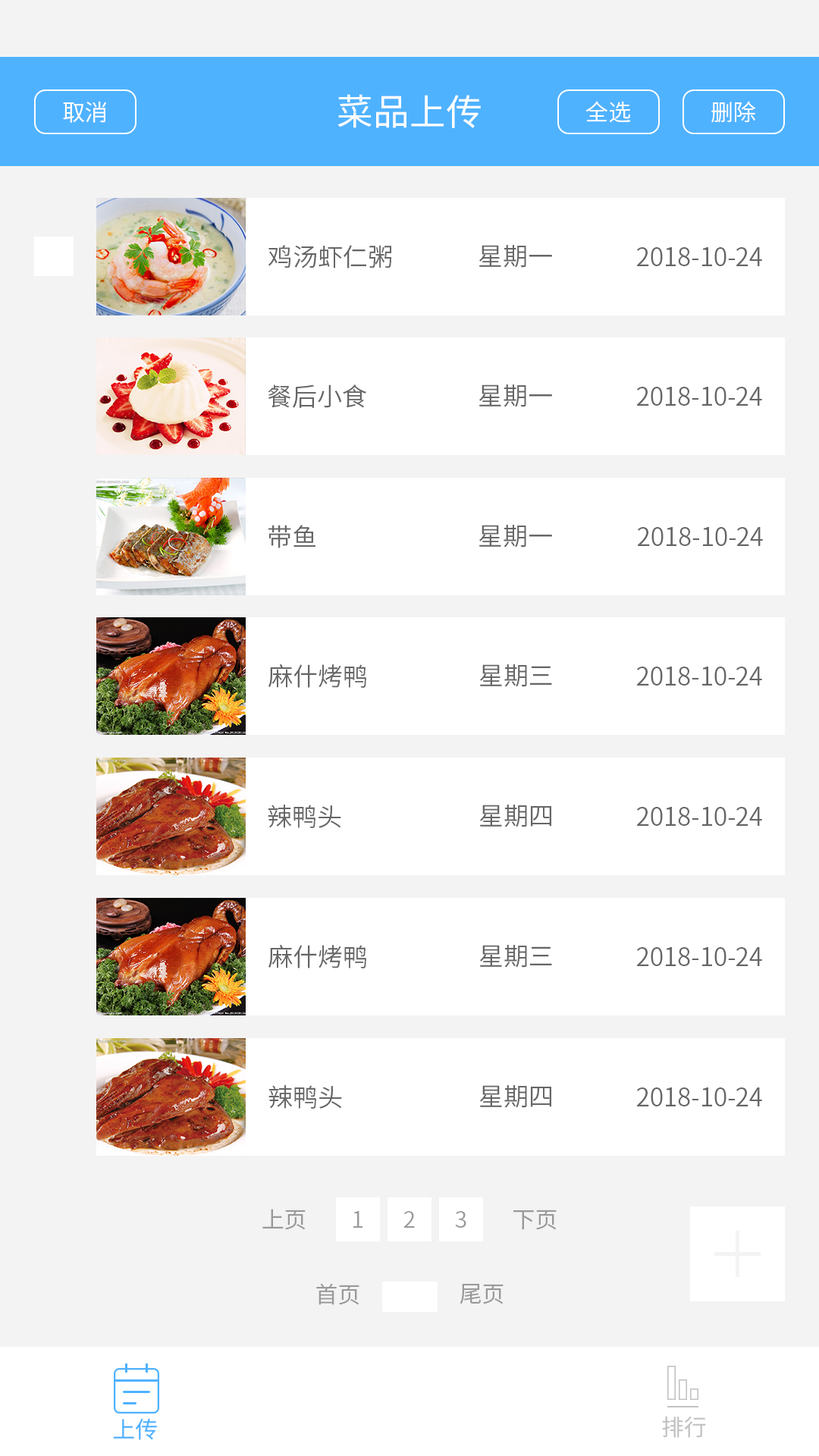
<style>
.page{position:relative;width:819px;height:1456px;background:#ffffff}
.page>*{position:absolute;margin:0}
.t1{font:22.7px "SourceHanSansCN-Normal";color:#ffffff}
.t2{font:36.4px "SourceHanSansCN-Regular";color:#fffefe}
.t3{font:25px "SourceHanSansCN-Normal";color:#666666}
.t4{font:22.7px "SourceHanSansCN-Normal";color:#999999}
.t5{font:22.7px "SourceHanSansCN-Regular";color:#4fb2ff}
.t6{font:22.7px "SourceHanSansCN-Regular";color:#c2c2c2}
</style>
<div class="page">
<p class="t1" style="left:63px;top:101px;width:43px;height:22px">取消</p>
<p class="t2" style="left:337px;top:94px;width:144px;height:34px">菜品上传</p>
<p class="t1" style="left:585px;top:101px;width:46px;height:22px">全选</p>
<p class="t1" style="left:711px;top:101px;width:45px;height:22px">删除</p>
<p class="t3" style="left:268px;top:245px;width:123px;height:23px">鸡汤虾仁粥</p>
<p class="t3" style="left:479px;top:245px;width:73px;height:23px">星期一</p>
<p class="t3" style="left:637px;top:247px;width:125px;height:19px">2018-10-24</p>
<p class="t3" style="left:268px;top:384px;width:99px;height:24px">餐后小食</p>
<p class="t3" style="left:479px;top:384px;width:73px;height:23px">星期一</p>
<p class="t3" style="left:637px;top:387px;width:125px;height:19px">2018-10-24</p>
<p class="t3" style="left:268px;top:525px;width:47px;height:23px">带鱼</p>
<p class="t3" style="left:479px;top:525px;width:73px;height:23px">星期一</p>
<p class="t3" style="left:638px;top:527px;width:125px;height:19px">2018-10-24</p>
<p class="t3" style="left:268px;top:664px;width:98px;height:24px">麻什烤鸭</p>
<p class="t3" style="left:479px;top:664px;width:73px;height:23px">星期三</p>
<p class="t3" style="left:637px;top:667px;width:125px;height:19px">2018-10-24</p>
<p class="t3" style="left:268px;top:805px;width:73px;height:23px">辣鸭头</p>
<p class="t3" style="left:479px;top:805px;width:72px;height:22px">星期四</p>
<p class="t3" style="left:637px;top:807px;width:125px;height:19px">2018-10-24</p>
<p class="t3" style="left:268px;top:945px;width:98px;height:23px">麻什烤鸭</p>
<p class="t3" style="left:479px;top:945px;width:73px;height:23px">星期三</p>
<p class="t3" style="left:637px;top:947px;width:125px;height:19px">2018-10-24</p>
<p class="t3" style="left:268px;top:1085px;width:74px;height:24px">辣鸭头</p>
<p class="t3" style="left:479px;top:1085px;width:72px;height:23px">星期四</p>
<p class="t3" style="left:637px;top:1087px;width:125px;height:19px">2018-10-24</p>
<p class="t4" style="left:262px;top:1209px;width:44px;height:21px">上页</p>
<p class="t4" style="left:353px;top:1211px;width:9px;height:17px">1</p>
<p class="t4" style="left:403px;top:1211px;width:12px;height:17px">2</p>
<p class="t4" style="left:455px;top:1211px;width:11px;height:17px">3</p>
<p class="t4" style="left:513px;top:1210px;width:44px;height:20px">下页</p>
<p class="t4" style="left:316px;top:1283px;width:43px;height:22px">首页</p>
<p class="t4" style="left:460px;top:1284px;width:44px;height:20px">尾页</p>
<p class="t5" style="left:113px;top:1418px;width:44px;height:22px">上传</p>
<p class="t6" style="left:662px;top:1416px;width:44px;height:22px">排行</p>
</div>
